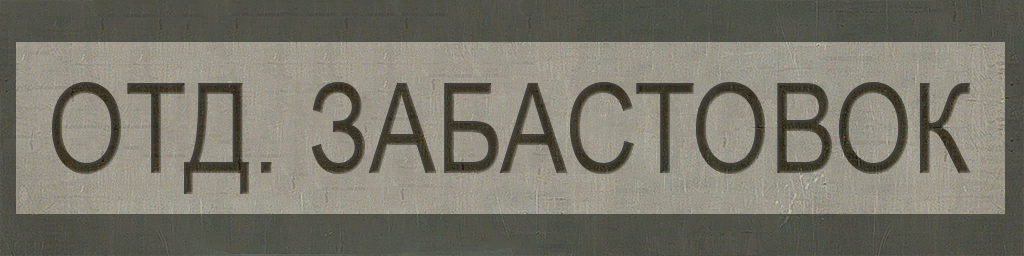
<style>
.page{position:relative;width:1024px;height:256px}
.page>*{position:absolute;margin:0}
.t1{font:126px "ArialMT";color:#473c31;scale:0.8 1}
</style>
<div class="page">
<p class="t1" style="left:52px;top:82px;width:919px;height:112px">ОТД. ЗАБАСТОВОК</p>
<p class="t1" style="left:52px;top:82px;width:919px;height:112px;opacity:0.53">ОТД. ЗАБАСТОВОК</p>
</div>
